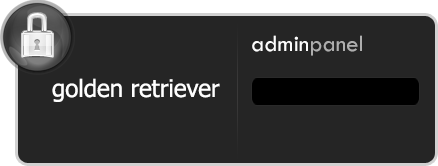
<style>
.page{position:relative;width:438px;height:166px;background:#252525}
.page>*{position:absolute;margin:0}
.t1{font:24px "TwCenMT-Regular";color:#fdfdfd}
.t2{font:24px "TwCenMT-Regular";color:#aeaeae}
.t3{font:24px "Tahoma";color:#ffffff}
</style>
<div class="page">
<p class="t1" style="left:252px;top:35px;width:110px;height:21px">admin<span class="t2">panel</span></p>
<p class="t3" style="left:52px;top:78px;width:168px;height:24px">golden retriever</p>
</div>
